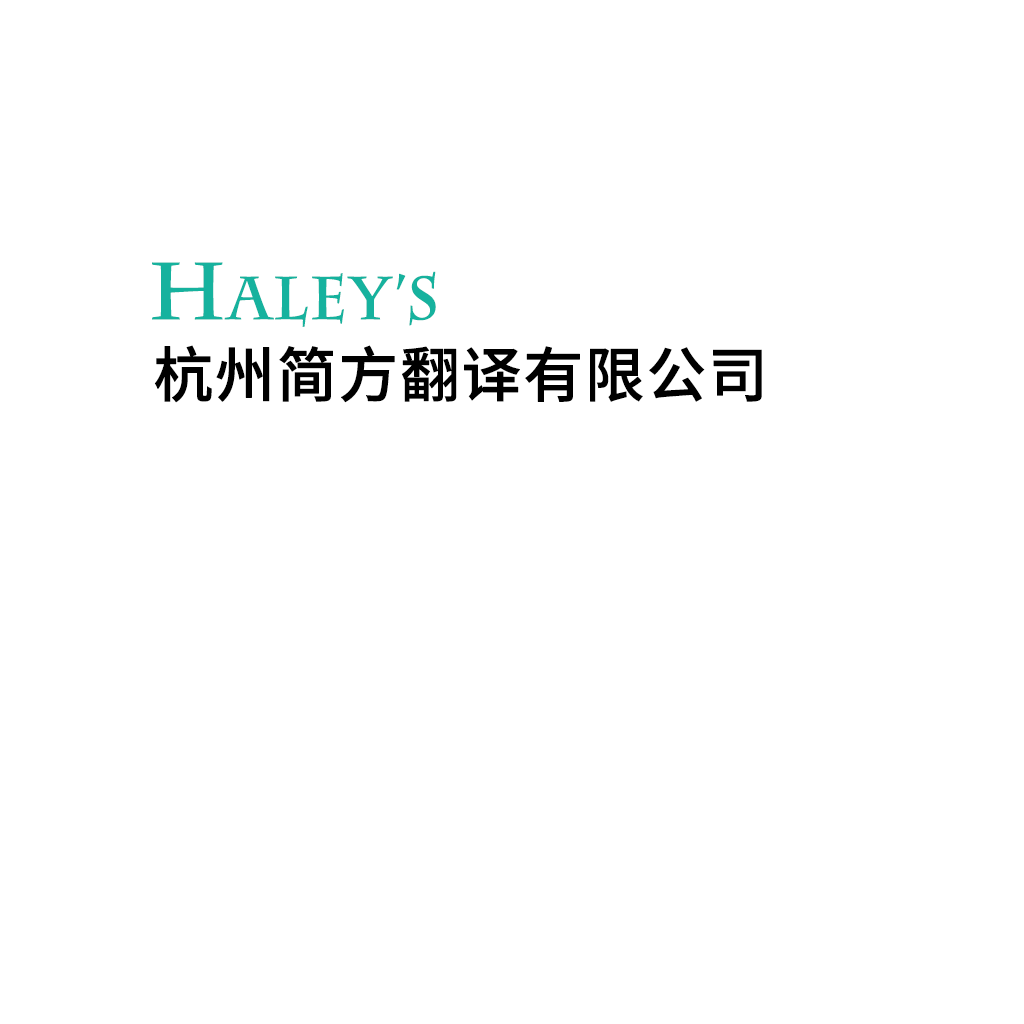
<style>
.page{position:relative;width:1024px;height:1024px;background:#ffffff}
.page>*{position:absolute;margin:0}
.t1{font:60px "CharlemagneStd-Bold";color:#16b29e;font-weight:bold}
.t2{font:80px "CharlemagneStd-Bold";color:#16b29e;font-weight:bold}
.t3{font:60px "NotoSansHans-Medium";color:#000000;font-weight:bold}
</style>
<div class="page">
<p class="t1" style="left:152px;top:262px;width:284px;height:65px"><span class="t2">H</span>aley’s</p>
<p class="t3" style="left:154px;top:345px;width:608px;height:58px">杭州简方翻译有限公司</p>
</div>
